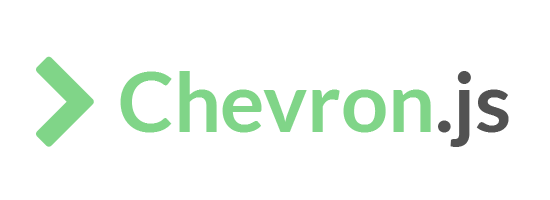
<style>
.page{position:relative;width:550px;height:200px;background:#ffffff}
.page>*{position:absolute;margin:0}
.t1{font:82.5px "Lato-Bold";color:#80d588}
.t2{font:82.5px "Lato-Bold";color:#525252}
</style>
<div class="page">
<p class="t1" style="left:120px;top:71px;width:389px;height:76px">Chevron<span class="t2">.js</span></p>
</div>
